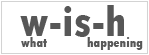
<style>
.page{position:relative;width:149px;height:55px;background:#ffffff}
.page>*{position:absolute;margin:0}
.t1{font:45px "TwCenMT-CondensedExtraBold";color:#575757}
.t2{font:14px "TwCenMT-CondensedExtraBold";color:#575757}
</style>
<div class="page">
<p class="t1" style="left:20px;top:5px;width:104px;height:32px">w-is-h</p>
<p class="t2" style="left:21px;top:37px;width:26px;height:10px">what</p>
<p class="t2" style="left:87px;top:37px;width:56px;height:13px">happening</p>
</div>
